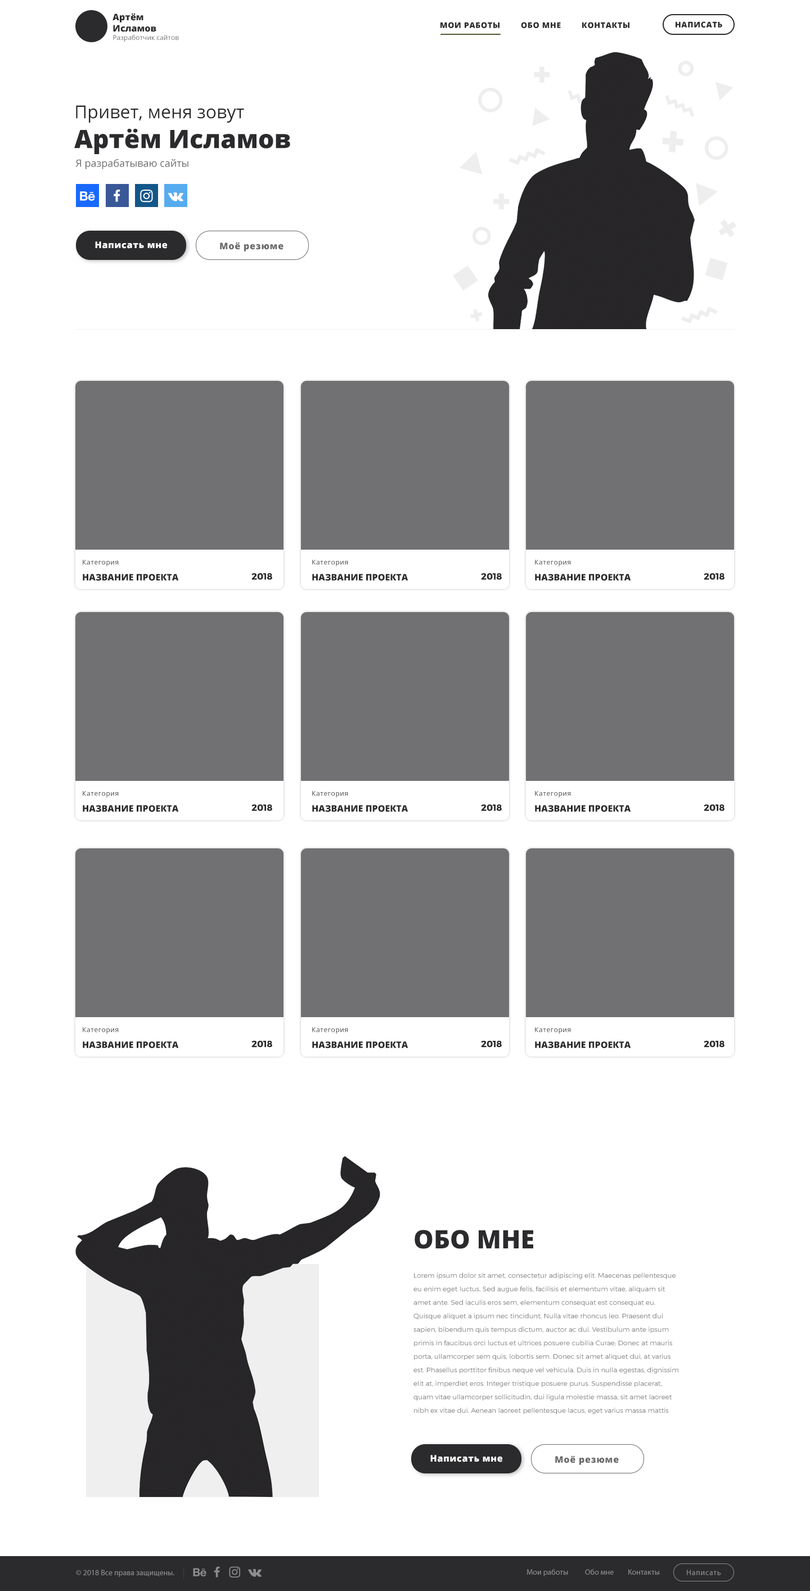
<style>
.page{position:relative;width:810px;height:1591px;background:#ffffff}
.page>*{position:absolute;margin:0}
.t1{font:9px/8.4px "OpenSans-ExtraBold";color:#2b2a2c}
.t2{font:7.9px "OpenSans-ExtraBold";letter-spacing:0.05em;color:#2b2a2c;text-transform:uppercase}
.t3{font:6.8px "OpenSans-Regular";color:#6a696b}
.t4{font:18px/8.4px "OpenSans-Regular";color:#2b2a2c}
.t5{font:25.3px/27px "OpenSans-ExtraBold";color:#2b2a2c}
.t6{font:10.1px "OpenSans-Regular";color:#6a696b}
.t7{font:9px "OpenSans-ExtraBold";letter-spacing:0.05em;color:#ffffff}
.t8{font:9px "OpenSans-ExtraBold";letter-spacing:0.05em;color:#6a696b}
.t9{font:6.8px "OpenSans-Regular";letter-spacing:0.05em;color:#2b2a2c}
.t10{font:9px "OpenSans-ExtraBold";color:#2b2a2c;text-transform:uppercase}
.t11{font:9px "Montserrat-Bold";color:#2b2a2c}
.t12{font:25.3px "OpenSans-ExtraBold";color:#2b2a2c;text-transform:uppercase}
.t13{font:6.8px/13.5px "Montserrat-Light";color:#717072}
.t14{font:7.9px "MyriadPro-Regular";color:#8d8d8e}
.t15{font:7.9px "MyriadPro-Regular";letter-spacing:0.05em;color:#8d8d8e}
</style>
<div class="page">
<p class="t1" style="left:112px;top:13px;width:44px;height:19px">Артём<br>Исламов</p>
<p class="t2" style="left:440px;top:22px;width:189px;height:6px">Мои работы  Обо мне  Контакты</p>
<p class="t2" style="left:676px;top:21px;width:46px;height:7px">Написать</p>
<p class="t3" style="left:113px;top:35px;width:66px;height:7px">Разработчик сайтов</p>
<p class="t4" style="left:74px;top:105px;width:216px;height:49px">Привет, меня зовут<br><span class="t5">Артём Исламов</span></p>
<p class="t6" style="left:75px;top:159px;width:113px;height:10px">Я разрабатываю сайты</p>
<p class="t7" style="left:95px;top:241px;width:72px;height:8px">Написать мне</p>
<p class="t8" style="left:220px;top:242px;width:64px;height:9px">Моё резюме</p>
<p class="t9" style="left:83px;top:560px;width:36px;height:6px">Категория</p>
<p class="t9" style="left:312px;top:560px;width:36px;height:6px">Категория</p>
<p class="t9" style="left:535px;top:560px;width:36px;height:6px">Категория</p>
<p class="t10" style="left:83px;top:574px;width:96px;height:6px">Название проекта</p>
<p class="t11" style="left:251px;top:573px;width:21px;height:7px">2018</p>
<p class="t10" style="left:312px;top:574px;width:96px;height:6px">Название проекта</p>
<p class="t11" style="left:481px;top:573px;width:21px;height:7px">2018</p>
<p class="t10" style="left:535px;top:574px;width:96px;height:6px">Название проекта</p>
<p class="t11" style="left:704px;top:573px;width:20px;height:7px">2018</p>
<p class="t9" style="left:83px;top:791px;width:36px;height:7px">Категория</p>
<p class="t9" style="left:312px;top:791px;width:36px;height:7px">Категория</p>
<p class="t9" style="left:535px;top:791px;width:36px;height:7px">Категория</p>
<p class="t10" style="left:83px;top:805px;width:96px;height:7px">Название проекта</p>
<p class="t11" style="left:251px;top:804px;width:21px;height:7px">2018</p>
<p class="t10" style="left:312px;top:805px;width:96px;height:7px">Название проекта</p>
<p class="t11" style="left:481px;top:804px;width:21px;height:7px">2018</p>
<p class="t10" style="left:535px;top:805px;width:96px;height:7px">Название проекта</p>
<p class="t11" style="left:704px;top:804px;width:20px;height:7px">2018</p>
<p class="t9" style="left:83px;top:1027px;width:36px;height:7px">Категория</p>
<p class="t9" style="left:312px;top:1027px;width:36px;height:7px">Категория</p>
<p class="t9" style="left:535px;top:1027px;width:36px;height:7px">Категория</p>
<p class="t10" style="left:83px;top:1041px;width:96px;height:7px">Название проекта</p>
<p class="t11" style="left:251px;top:1040px;width:21px;height:7px">2018</p>
<p class="t10" style="left:312px;top:1041px;width:96px;height:7px">Название проекта</p>
<p class="t11" style="left:481px;top:1040px;width:21px;height:7px">2018</p>
<p class="t10" style="left:535px;top:1041px;width:96px;height:7px">Название проекта</p>
<p class="t11" style="left:704px;top:1040px;width:20px;height:7px">2018</p>
<p class="t12" style="left:415px;top:1230px;width:118px;height:19px">Обо мне</p>
<p class="t13" style="left:413px;top:1272px;width:265px;height:142px">Lorem ipsum dolor sit amet, consectetur adipiscing elit. Maecenas pellentesque eu enim eget luctus. Sed augue felis, facilisis et elementum vitae, aliquam sit amet ante. Sed iaculis eros sem, elementum consequat est consequat eu. Quisque aliquet a ipsum nec tincidunt. Nulla vitae rhoncus leo. Praesent dui sapien, bibendum quis tempus dictum, auctor ac dui. Vestibulum ante ipsum primis in faucibus orci luctus et ultrices posuere cubilia Curae; Donec at mauris porta, ullamcorper sem quis, lobortis sem. Donec sit amet aliquet dui, at varius est. Phasellus porttitor finibus neque vel vehicula. Duis in nulla egestas, dignissim elit at, imperdiet eros. Integer tristique posuere purus. Suspendisse placerat, quam vitae ullamcorper sollicitudin, dui ligula molestie massa, sit amet laoreet nibh ex vitae dui. Aenean laoreet pellentesque lacus, eget varius massa mattis quis. Nunc ultrices urna eu nunc lobortis pulvinar. Duis viverra, quam non imperdiet scelerisque, urna nunc consequat velit, in mollis erat nibh in libero.</p>
<p class="t7" style="left:430px;top:1455px;width:72px;height:7px">Написать мне</p>
<p class="t8" style="left:555px;top:1455px;width:64px;height:10px">Моё резюме</p>
<p class="t14" style="left:76px;top:1569px;width:98px;height:8px">© 2018 Все права защищены.</p>
<p class="t14" style="left:526px;top:1569px;width:133px;height:7px">Мои работы          Обо мне  Контакты</p>
<p class="t15" style="left:687px;top:1569px;width:34px;height:6px">Написать</p>
</div>
